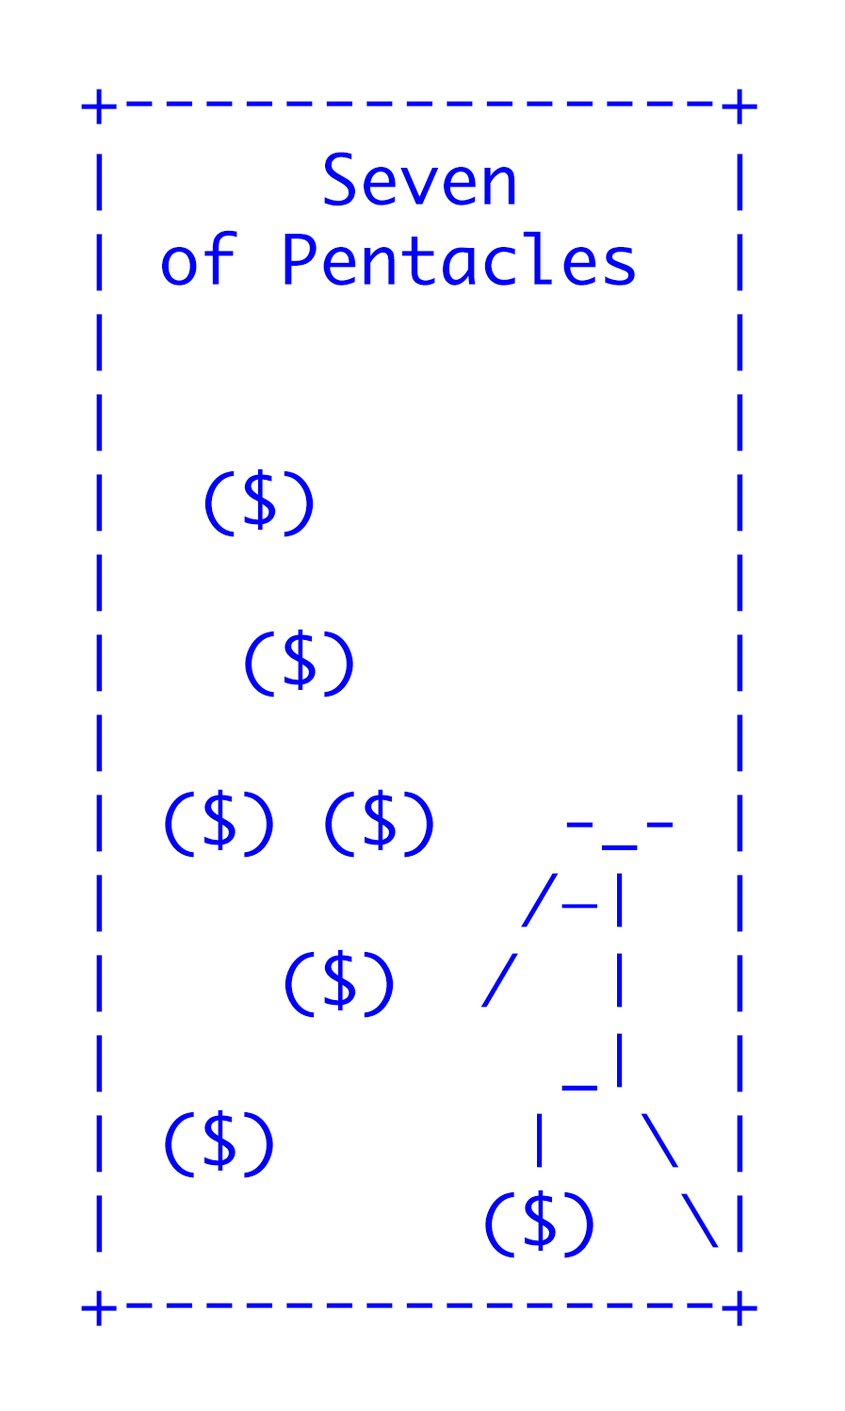
<style>
.page{position:relative;width:845px;height:1411px;background:#ffffff}
.page>*{position:absolute;margin:0}
.t1{font:66.7px "Monaco";color:#0000ff}
</style>
<div class="page">
<p class="t1" style="left:81px;top:89px;width:677px;height:1237px">+---------------+<br>│     Seven     │<br>│ of Pentacles  │<br>│               │<br>│               │<br>│  ($)          │<br>│               │<br>│   ($)         │ <br>│               │ <br>│ ($) ($)   -_- │<br>│          /—|  │ <br>│    ($)  /  |  │ <br>│           _|  │<br>│ ($)      |  \ │<br>│         ($)  \│<br>+---------------+</p>
</div>
